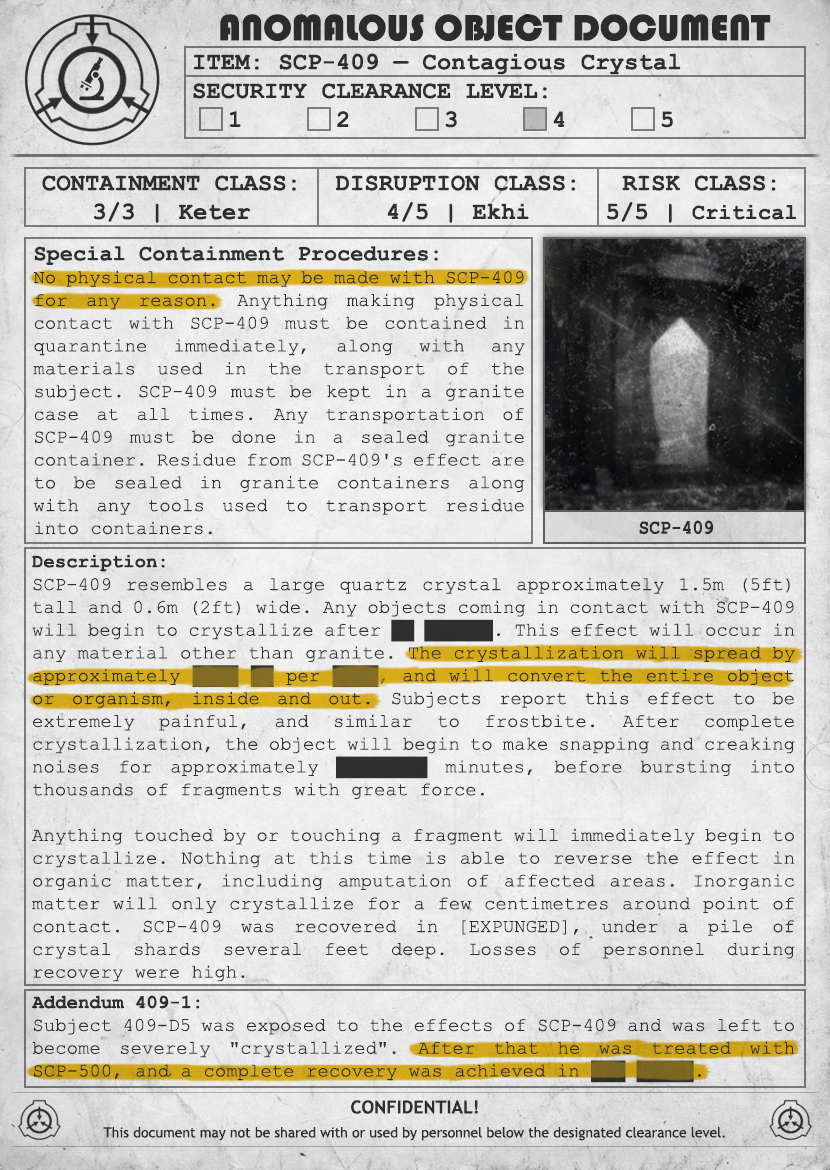
<style>
.page{position:relative;width:830px;height:1170px}
.page>*{position:absolute;margin:0}
.t1{font:38px "Bauhaus93";color:#333333;text-transform:uppercase}
.t2{font:24px "CourierNewPS-BoldMT";color:#333333}
.t3{font:24px "CourierNewPS-BoldMT";color:#333333;text-transform:uppercase}
.t4{font:22px "CourierNewPS-BoldMT";color:#333333}
.t5{font:19px "CourierNewPSMT";color:#333333}
.t6{font:20.1px "CourierNewPS-BoldMT";color:#333333;scale:0.9 1}
.t7{font:19px "CourierNewPS-BoldMT";color:#333333}
.t8{font:19px "CourierNewPSMT"}
.t9{font:19px "CourierNewPS-BoldMT"}
.t10{font:14px/24px "TrebuchetMS";color:#333333}
.t11{font:18px/24px "TrebuchetMS-Bold";color:#333333}
</style>
<div class="page">
<p class="t1" style="left:220px;top:14px;width:551px;height:27px">anomalous object document</p>
<p class="t2" style="left:193px;top:53px;width:488px;height:75px">ITEM: SCP-409 — Contagious Crystal<br><span class="t3">Security CLEARANCE LEVEL:</span> <br> 1   2   3   4   5</p>
<p class="t2" style="left:42px;top:175px;width:254px;height:48px;text-align:center">CONTAINMENT CLASS:<br>3/3 | Keter</p>
<p class="t2" style="left:335px;top:175px;width:241px;height:48px;text-align:center">DISRUPTION CLASS:<br>4/5 | Ekhi</p>
<p class="t2" style="left:607px;top:175px;width:190px;height:48px;text-align:center">RISK CLASS:<br>5/5 | <span class="t4">Critical</span></p>
<p class="t5" style="left:33px;top:246px;width:492px;height:289px;text-align:justify"><span class="t4">Special Containment Procedures: <br></span>No physical contact may be made with SCP-409 for any reason. Anything making physical contact with SCP-409 must be contained in quarantine immediately, along with any materials used in the transport of the subject. SCP-409 must be kept in a granite case at all times. Any transportation of SCP-409 must be done in a sealed granite container. Residue from SCP-409's effect are to be sealed in granite containers along with any tools used to transport residue into containers.</p>
<p class="t6" style="left:639px;top:520px;width:75px;height:15px">SCP-409</p>
<p class="t5" style="left:32px;top:555px;width:763px;height:427px;text-align:justify"><span class="t7">Description:<br></span>SCP-409 resembles a large quartz crystal approximately 1.5m (5ft) tall and 0.6m (2ft) wide. Any objects coming in contact with SCP-409 will begin to crystallize after ██ ██████. This effect will occur in any material other than granite. The crystallization will spread by approximately ████ ██ per ████, and will convert the entire object or organism, inside and out. Subjects report this effect to be extremely painful, and similar to frostbite. After complete crystallization, the object will begin to make snapping and creaking noises for approximately ████████ minutes, before bursting into thousands of fragments with great force.<br><br>Anything touched by or touching a fragment will immediately begin to crystallize. Nothing at this time is able to reverse the effect in organic matter, including amputation of affected areas. Inorganic matter will only crystallize for a few centimetres around point of contact. SCP-409 was recovered in [EXPUNGED], under a pile of crystal shards several feet deep. Losses of personnel during recovery were high.</p>
<p class="t8" style="left:31px;top:995px;width:764px;height:88px;text-align:justify"><span class="t9">Addendum 409-1: <br></span>Subject 409-D5 was exposed to the effects of SCP-409 and was left to become severely "crystallized". After that he was treated with SCP-500, and a complete recovery was achieved in ███ █████.</p>
<p class="t10" style="left:103px;top:1100px;width:622px;height:41px;text-align:center"><span class="t11">CONFIDENTIAL!<br></span>This document may not be shared with or used by personnel below the designated clearance level.</p>
</div>
